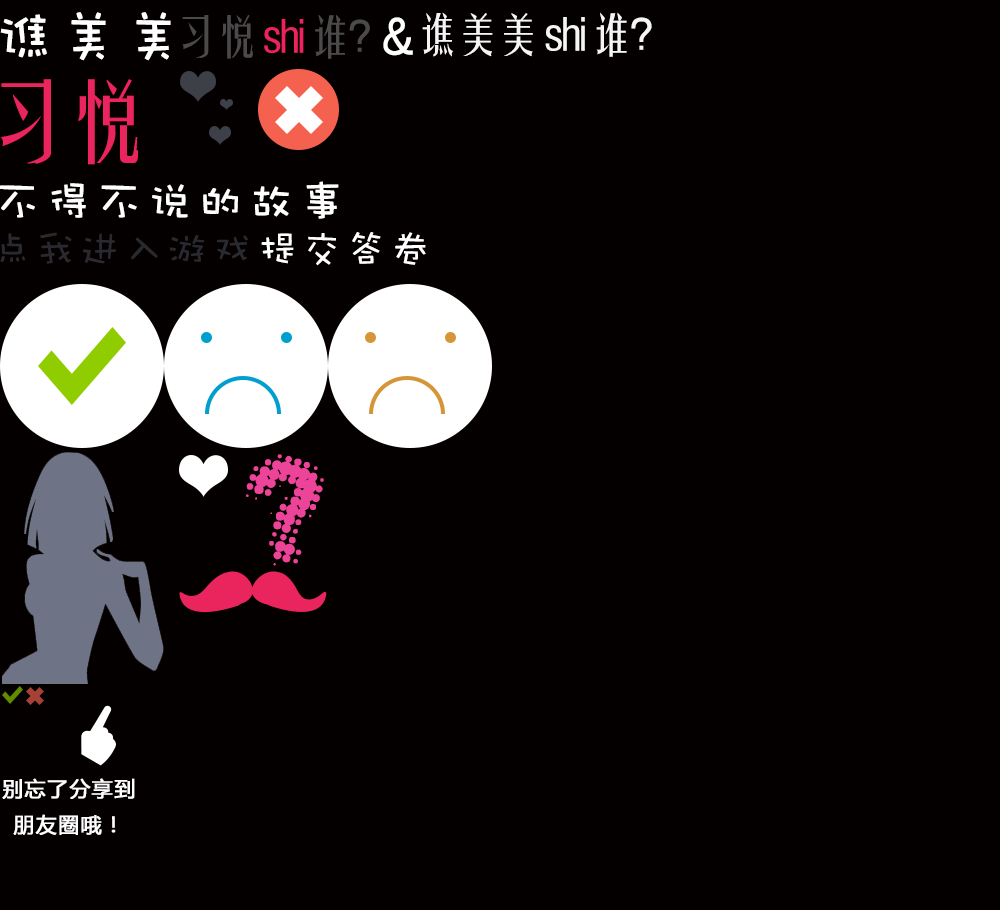
<style>
.page{position:relative;width:1000px;height:910px;background:#040000}
.page>*{position:absolute;margin:0}
.t1{font:57.3px "DFWaWaSC-W5";letter-spacing:0.1em;color:#ffffff;font-weight:bold}
.t2{font:45px "FZYTK--GBK1-0";letter-spacing:-0.1em;color:#ea245d}
.t3{font:45px "FZYTK--GBK1-0";letter-spacing:-0.1em;color:#4a4a4a}
.t4{font:55.2px "DFWaWaSC-W5";letter-spacing:0.1em;color:#ffffff;font-weight:bold}
.t5{font:45px "FZYTK--GBK1-0";letter-spacing:-0.1em;color:#f5f5f5}
.t6{font:88.2px "FZYTK--GBK1-0";letter-spacing:-0.1em;color:#ea245d}
.t7{font:44.8px "DFWaWaSC-W5";letter-spacing:0.1em;color:#ffffff;font-weight:bold}
.t8{font:40px "DFWaWaSC-W5";letter-spacing:0.1em;color:#292a30}
.t9{font:40px "DFWaWaSC-W5";letter-spacing:0.1em;color:#ffffff}
.t10{font:121.7px "AntFarmGoneCamping";letter-spacing:0.1em;color:#eb4499}
.t11{font:20.7px "MicrosoftYaHei";letter-spacing:0.05em;color:#ffffff;font-weight:bold}
</style>
<div class="page">
<p class="t1" style="left:0px;top:12px;width:171px;height:49px">谯美美</p>
<p class="t2" style="left:182px;top:14px;width:188px;height:45px"><span class="t3">习悦 </span>shi <span class="t3">谁？</span></p>
<p class="t4" style="left:383px;top:17px;width:30px;height:39px">&amp;</p>
<p class="t5" style="left:422px;top:12px;width:230px;height:45px">谯美美 shi 谁？</p>
<p class="t6" style="left:0px;top:79px;width:138px;height:86px">习悦</p>
<p class="t7" style="left:0px;top:181px;width:339px;height:38px">不得不说的故事</p>
<p class="t8" style="left:0px;top:232px;width:248px;height:32px">点我进入游戏</p>
<p class="t9" style="left:261px;top:232px;width:165px;height:34px">提交答卷</p>
<p class="t10" style="left:246px;top:454px;width:78px;height:112px">?</p>
<p class="t11" style="left:2px;top:778px;width:133px;height:57px;text-align:center">别忘了分享到<br>朋友圈哦！</p>
</div>
